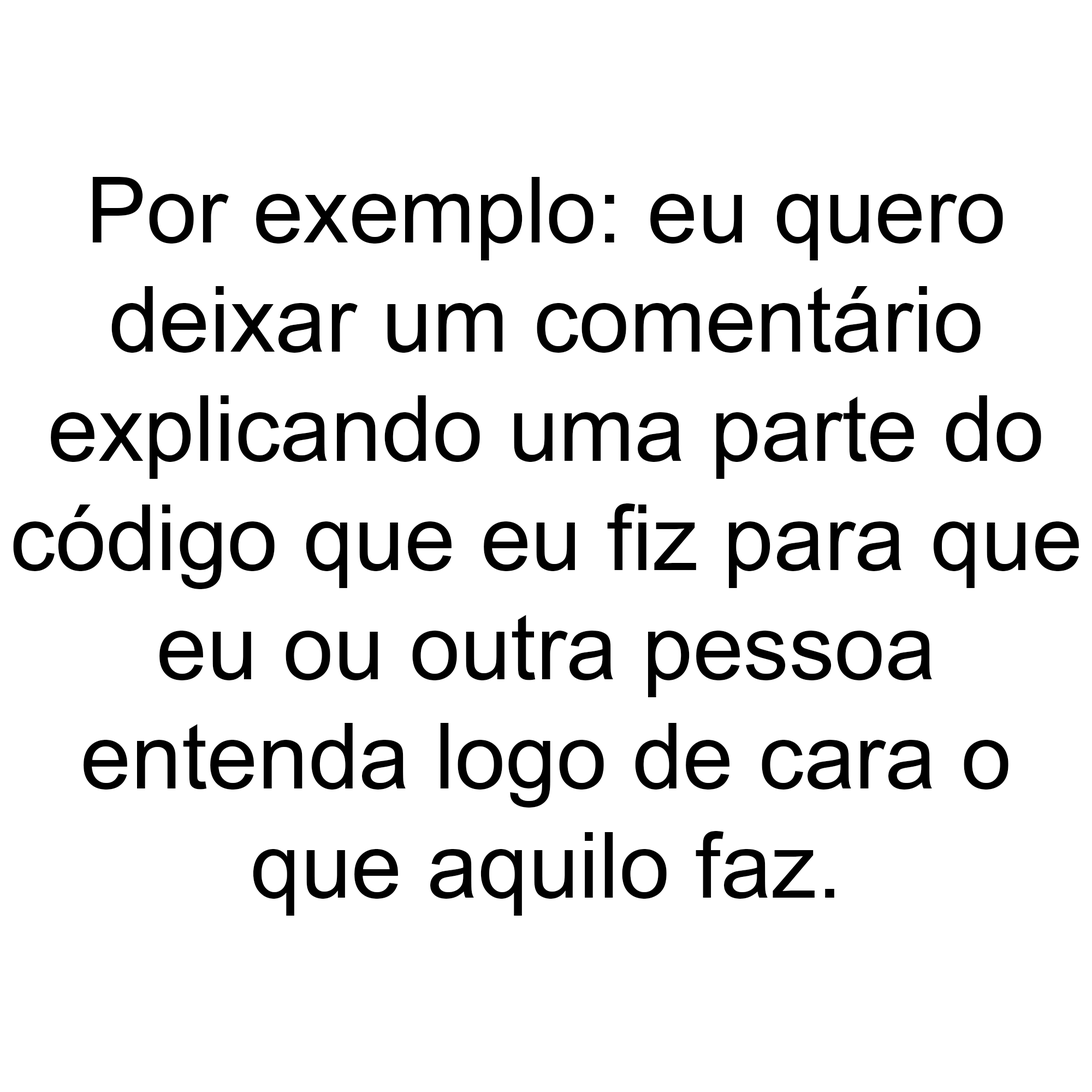
<style>
.page{position:relative;width:1092px;height:1092px;background:#ffffff}
.page>*{position:absolute;margin:0}
.t1{font:91px "ArialMT";color:#000000}
</style>
<div class="page">
<p class="t1" style="left:13px;top:177px;width:1066px;height:739px;text-align:center">Por exemplo: eu quero<br>deixar um comentário<br>explicando uma parte do<br>código que eu fiz para que<br>eu ou outra pessoa<br>entenda logo de cara o<br>que aquilo faz.</p>
</div>
